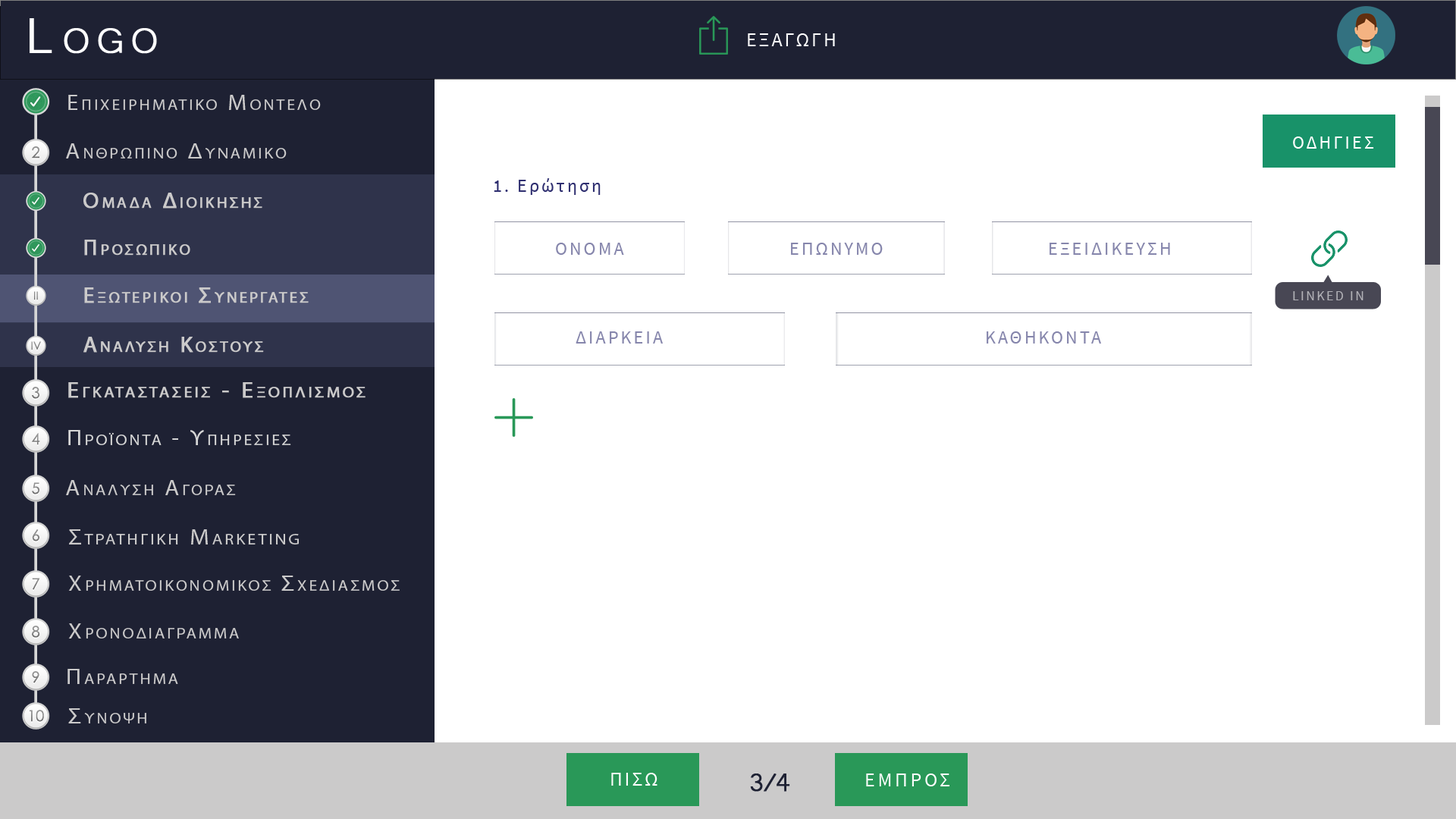
<style>
.page{position:relative;width:1456px;height:819px;background:#ffffff}
.page>*{position:absolute;margin:0}
.t1{font:63.7px "Microsoft-Yi-Baiti";letter-spacing:0.13em;color:#ffffff;font-variant:small-caps;font-weight:bold}
.t2{font:20px "SourceSansPro-Regular";letter-spacing:0.1em;color:#fefefe;text-transform:uppercase}
.t3{font:21.7px "MyriadPro-Regular";letter-spacing:0.13em;color:#cbcaca;font-variant:small-caps;scale:1.09 1}
.t4{font:23.4px "Microsoft-Yi-Baiti";letter-spacing:0.13em;color:#cbcaca;font-variant:small-caps;font-weight:bold}
.t5{font:18.2px "SourceSansPro-Regular";letter-spacing:0.13em;color:#ffffff;text-transform:uppercase}
.t6{font:15.3px "CenturyGothic";color:#7d7d7d}
.t7{font:18.2px "SourceSansPro-Regular";letter-spacing:0.13em;color:#2f2f70}
.t8{font:18.2px "SourceSansPro-Regular";letter-spacing:0.13em;color:#2f2f70;text-transform:uppercase}
.t9{font:22.3px "MyriadPro-Regular";letter-spacing:0.13em;color:#cbcaca;font-variant:small-caps;font-weight:bold}
.t10{font:18.2px "SourceSansPro-Regular";letter-spacing:0.13em;color:#8686ac;text-transform:uppercase}
.t11{font:11.2px "CenturyGothic";color:#828282}
.t12{font:13.7px "SourceSansPro-Regular";letter-spacing:0.13em;color:#b2b2b7;text-transform:uppercase}
.t13{font:11.2px "CenturyGothic";color:#818181}
.t14{font:15.3px "CenturyGothic";color:#8b8b8b}
.t15{font:21.7px/91px "MyriadPro-Regular";letter-spacing:0.13em;color:#cbcaca;font-variant:small-caps;font-weight:bold;scale:1.09 1}
.t16{font:23.4px/91px "Microsoft-Yi-Baiti";letter-spacing:0.13em;color:#cbcaca;font-variant:small-caps;font-weight:bold}
.t17{font:15.3px "CenturyGothic";color:#878787}
.t18{font:21.7px "MyriadPro-Regular";letter-spacing:0.13em;color:#d6d6d6;font-variant:small-caps;scale:1.09 1}
.t19{font:23.4px "Microsoft-Yi-Baiti";letter-spacing:0.13em;color:#d6d6d6;font-variant:small-caps;font-weight:bold}
.t20{font:15.3px "CenturyGothic";color:#898989}
.t21{font:15.3px "CenturyGothic";color:#838383}
.t22{font:22.2px "MyriadPro-Regular";letter-spacing:0.13em;color:#cbcaca;font-variant:small-caps;scale:1.09 1}
.t23{font:25.5px "Microsoft-Yi-Baiti";letter-spacing:0.13em;color:#cbcaca;font-variant:small-caps;font-weight:bold}
.t24{font:15.3px "CenturyGothic";color:#888888}
.t25{font:23.7px "Microsoft-Yi-Baiti";letter-spacing:0.13em;color:#cbcaca;font-variant:small-caps;scale:1.09 1}
.t26{font:32.8px "Microsoft-Yi-Baiti";letter-spacing:-0.1em;color:#1e2133;font-weight:bold}
.t27{font:20px "SourceSansPro-Regular";letter-spacing:0.13em;color:#fefefe;text-transform:uppercase}
</style>
<div class="page">
<p class="t1" style="left:30px;top:18px;width:127px;height:36px">Logo</p>
<p class="t2" style="left:748px;top:33px;width:87px;height:13px">εξαγωγη</p>
<p class="t3" style="left:68px;top:95px;width:253px;height:15px"><span class="t4">   </span>Επιχειρηματικο Μοντελο</p>
<p class="t5" style="left:1293px;top:136px;width:81px;height:13px">Οδηγιεσ</p>
<p class="t6" style="left:32px;top:146px;width:7px;height:12px">2</p>
<p class="t3" style="left:66px;top:143px;width:221px;height:15px"><span class="t4">   </span>Ανθρωπινο Δυναμικο</p>
<p class="t7" style="left:494px;top:178px;width:107px;height:17px"><span class="t8">1. </span>Ερώτηση</p>
<p class="t9" style="left:83px;top:193px;width:179px;height:16px">Ομαδα Διοικησησ</p>
<p class="t9" style="left:84px;top:240px;width:106px;height:16px">Προσωπικο</p>
<p class="t10" style="left:556px;top:243px;width:68px;height:12px">ONOMA</p>
<p class="t10" style="left:791px;top:243px;width:92px;height:12px">ΕΠΩΝΥΜΟ</p>
<p class="t10" style="left:1050px;top:243px;width:120px;height:12px">εξειδικευση</p>
<p class="t11" style="left:34px;top:291px;width:4px;height:9px">II</p>
<p class="t9" style="left:84px;top:287px;width:225px;height:16px">Εξωτερικοι Συνεργατεσ</p>
<p class="t12" style="left:1293px;top:291px;width:70px;height:9px">Linked in</p>
<p class="t13" style="left:31px;top:341px;width:10px;height:9px">IV</p>
<p class="t9" style="left:83px;top:337px;width:181px;height:16px">Αναλυση Κοστουσ</p>
<p class="t10" style="left:576px;top:331px;width:87px;height:13px">Διαρκεια</p>
<p class="t10" style="left:987px;top:331px;width:114px;height:13px">καθηκοντα</p>
<p class="t14" style="left:32px;top:387px;width:7px;height:12px">3</p>
<p class="t15" style="left:68px;top:382px;width:298px;height:16px"><span class="t16">   </span>Εγκαταστασεισ - Εξοπλισμοσ<br><br><span class="t16">Equipment</span></p>
<p class="t17" style="left:32px;top:433px;width:8px;height:12px">4</p>
<p class="t18" style="left:68px;top:430px;width:223px;height:15px"><span class="t19">   </span>Προϊοντα - Υπηρεσιεσ</p>
<p class="t20" style="left:32px;top:482px;width:7px;height:12px">5</p>
<p class="t3" style="left:66px;top:480px;width:170px;height:15px"><span class="t4">   </span>Αναλυση Αγορασ</p>
<p class="t21" style="left:32px;top:529px;width:7px;height:12px">6</p>
<p class="t22" style="left:69px;top:529px;width:230px;height:15px"><span class="t23">   </span>Στρατηγικη Marketing</p>
<p class="t24" style="left:32px;top:578px;width:8px;height:12px">7</p>
<p class="t3" style="left:68px;top:576px;width:332px;height:15px"><span class="t23">   </span>Χρηματοικονομικοσ Σχεδιασμοσ</p>
<p class="t14" style="left:32px;top:626px;width:8px;height:12px">8</p>
<p class="t3" style="left:68px;top:623px;width:171px;height:16px"><span class="t23">   </span>Χρονοδιαγραμμα</p>
<p class="t21" style="left:32px;top:671px;width:7px;height:12px">9</p>
<p class="t3" style="left:67px;top:669px;width:111px;height:15px"><span class="t25">   </span>Παραρτημα</p>
<p class="t17" style="left:29px;top:710px;width:15px;height:12px">10</p>
<p class="t3" style="left:68px;top:708px;width:78px;height:15px"><span class="t25">   </span>Συνοψη</p>
<p class="t2" style="left:611px;top:773px;width:46px;height:13px">Πισω</p>
<p class="t26" style="left:750px;top:773px;width:40px;height:19px">3/4</p>
<p class="t27" style="left:866px;top:773px;width:83px;height:13px">εμπροσ</p>
</div>
